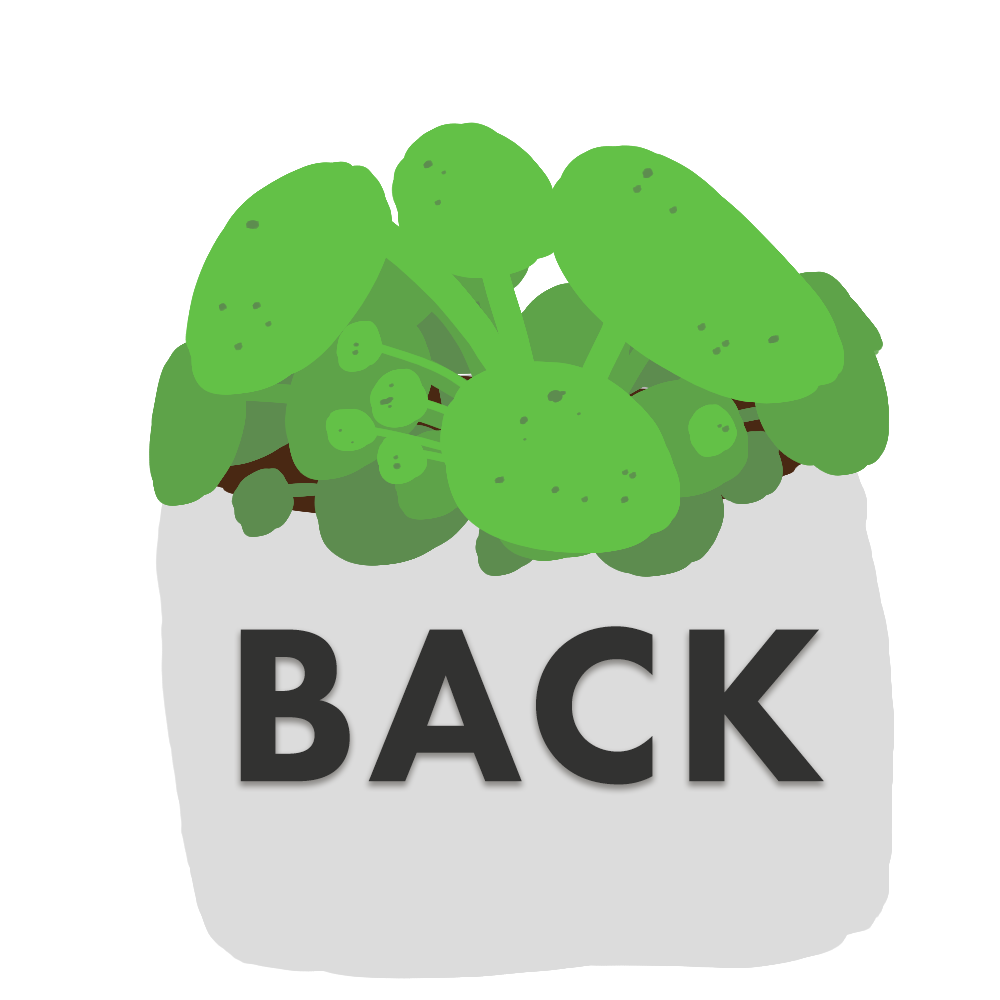
<style>
.page{position:relative;width:1000px;height:1000px;background:#ffffff}
.page>*{position:absolute;margin:0}
.t1{font:227px "FuturaPT-Heavy";letter-spacing:0.04em;color:#323231}
</style>
<div class="page">
<p class="t1" style="left:240px;top:626px;width:584px;height:159px">BACK</p>
</div>
